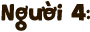
<style>
.page{position:relative;width:90px;height:32px;background:#ffffff}
.page>*{position:absolute;margin:0}
.t1{font:26px "iCielPequena";color:#2c1800}
</style>
<div class="page">
<p class="t1" style="left:1px;top:1px;width:89px;height:30px">Người 4:</p>
</div>
